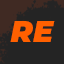
<style>
.page{position:relative;width:64px;height:64px;background:#242424}
.page>*{position:absolute;margin:0}
.t1{font:30px "Montserrat-BlackItalic";color:#ff6000}
</style>
<div class="page">
<p class="t1" style="left:10px;top:21px;width:45px;height:21px">RE</p>
</div>
